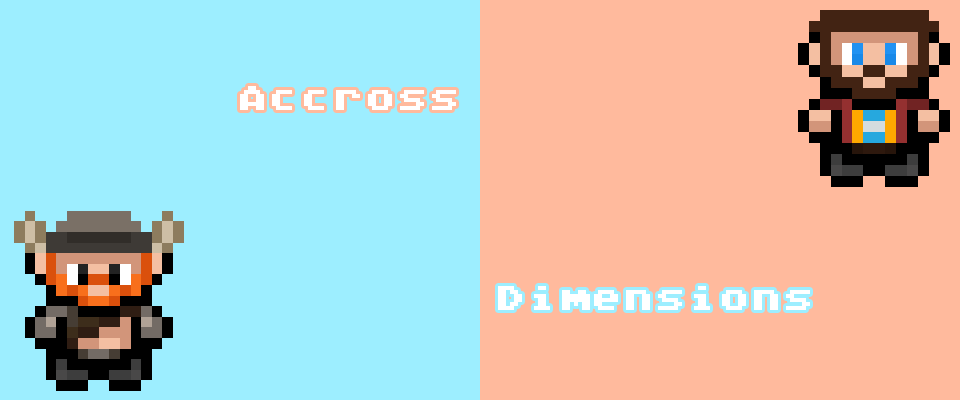
<style>
.page{position:relative;width:960px;height:400px;background:#9deeff}
.page>*{position:absolute;margin:0}
.t1{font:32px "AtariClassic-Regular";color:#ffffff}
</style>
<div class="page">
<p class="t1" style="left:240px;top:86px;width:216px;height:24px">Accross</p>
<p class="t1" style="left:498px;top:286px;width:312px;height:24px">Dimensions</p>
</div>
